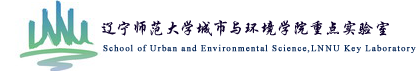
<style>
.page{position:relative;width:420px;height:71px;background:#ffffff}
.page>*{position:absolute;margin:0}
.t1{font:16.7px "STXingkai";letter-spacing:0.1em;color:#0f022e}
.t2{font:8.8px "TimesNewRomanPSMT";letter-spacing:0.1em;color:#042658;font-weight:bold}
</style>
<div class="page">
<p class="t1" style="left:101px;top:20px;width:288px;height:17px">辽宁师范大学城市与环境学院重点实验室</p>
<p class="t2" style="left:103px;top:44px;width:313px;height:9px">School of Urban and Environmental Science,LNNU Key Laboratory</p>
</div>
